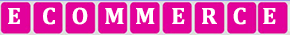
<style>
.page{position:relative;width:290px;height:35px;background:#e2019b}
.page>*{position:absolute;margin:0}
.t1{font:24px "Cambria-Bold";color:#ffffff}
</style>
<div class="page">
<p class="t1" style="left:8px;top:7px;width:268px;height:18px">E    C   O   M  M   E   R   C   E</p>
</div>
